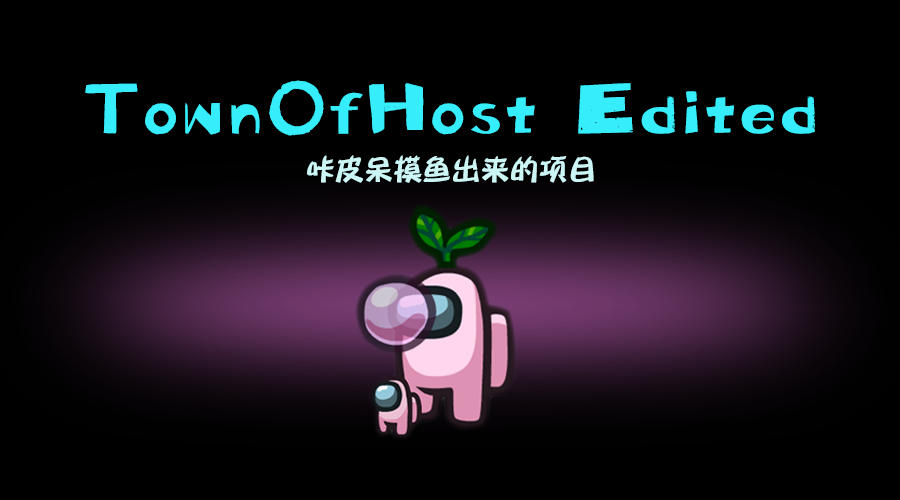
<style>
.page{position:relative;width:900px;height:500px;background:#000000}
.page>*{position:absolute;margin:0}
.t1{font:72px "ShanghaiFace-Zen-BoldGB2.0";color:#36eefb;scale:0.97 1}
.t2{font:30px "TianTianQuanHaiBaoZiTi";color:#ccf5f5;scale:0.97 1}
</style>
<div class="page">
<p class="t1" style="left:85px;top:80px;width:730px;height:56px">TownOfHost Edited</p>
<p class="t2" style="left:307px;top:155px;width:287px;height:28px">咔皮呆摸鱼出来的项目</p>
</div>
